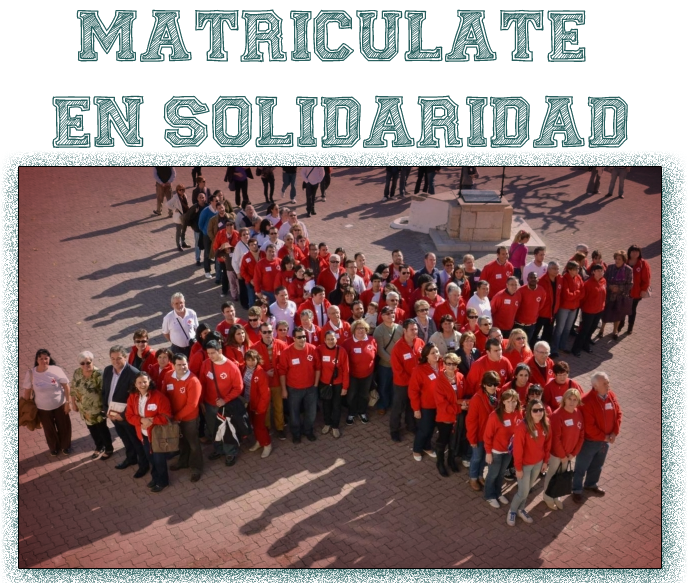
<style>
.page{position:relative;width:688px;height:583px;background:#ffffff}
.page>*{position:absolute;margin:0}
.t1{font:72px "FineCollege";color:#1c5554}
</style>
<div class="page">
<p class="t1" style="left:52px;top:9px;width:576px;height:140px;text-align:center">MATRICULATE <br>EN SOLIDARIDAD</p>
</div>
